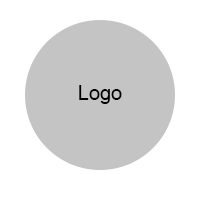
<style>
.page{position:relative;width:200px;height:200px;background:#ffffff}
.page>*{position:absolute;margin:0}
.t1{font:20px "ArialMT";color:#000000}
</style>
<div class="page">
<p class="t1" style="left:79px;top:85px;width:43px;height:19px">Logo</p>
</div>
